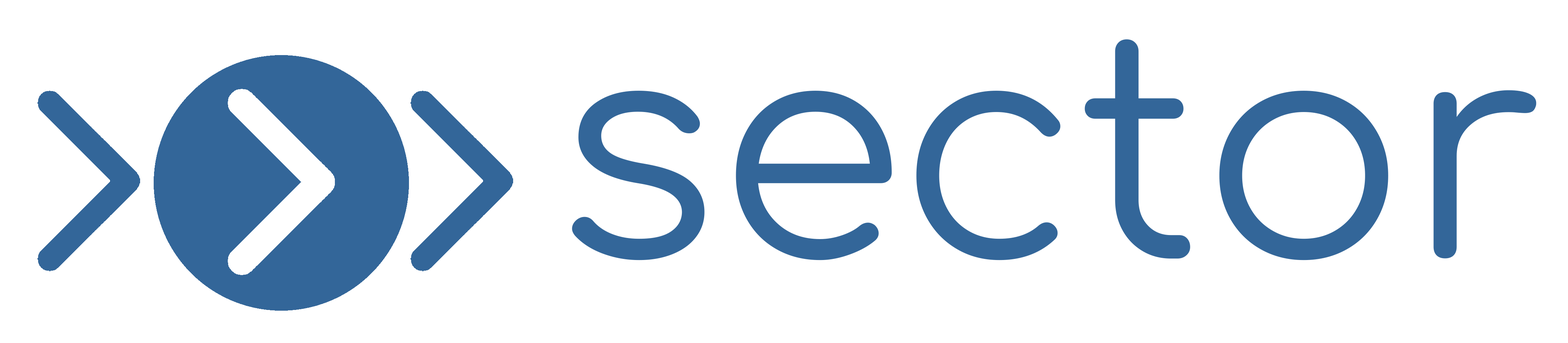
<style>
.page{position:relative;width:1568px;height:343px;background:#ffffff}
.page>*{position:absolute;margin:0}
.t1{font:303.6px "Comfortaa-Regular";color:#336699}
</style>
<div class="page">
<p class="t1" style="left:572px;top:39px;width:964px;height:221px">sector</p>
</div>
